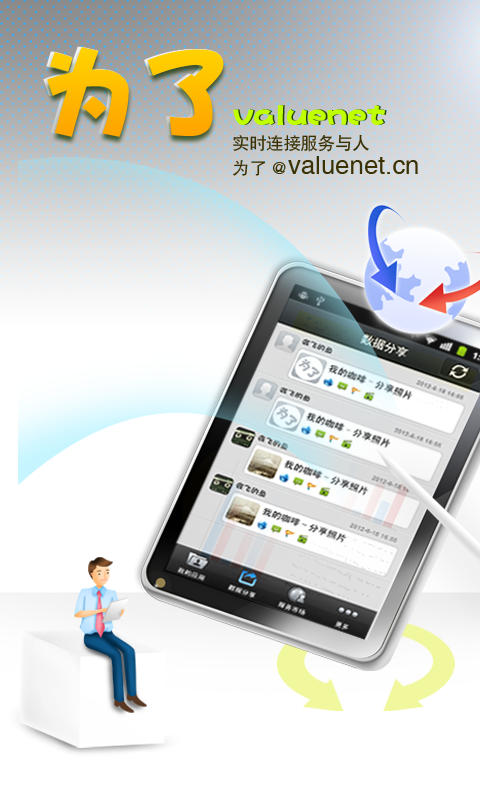
<style>
.page{position:relative;width:480px;height:800px;background:#ffffff}
.page>*{position:absolute;margin:0}
.t1{font:99px "DFPHaiBaoW12";color:#ffbf00}
.t2{font:30.1px "DFPHaiBaoW12";color:#c0ff00}
.t3{font:17.1px/18.6px "CTHeiTiSJ";color:#3a3104}
.t4{font:25.7px/18.6px "CTHeiTiSJ";color:#3a3104}
</style>
<div class="page">
<p class="t1" style="left:47px;top:47px;width:177px;height:90px">为了</p>
<p class="t2" style="left:233px;top:105px;width:152px;height:20px">valuenet</p>
<p class="t2" style="left:234px;top:105px;width:153px;height:20px">valuenet</p>
<p class="t3" style="left:232px;top:134px;width:186px;height:42px">实时连接服务与人<br>为了@<span class="t4">valuenet.cn</span></p>
</div>
